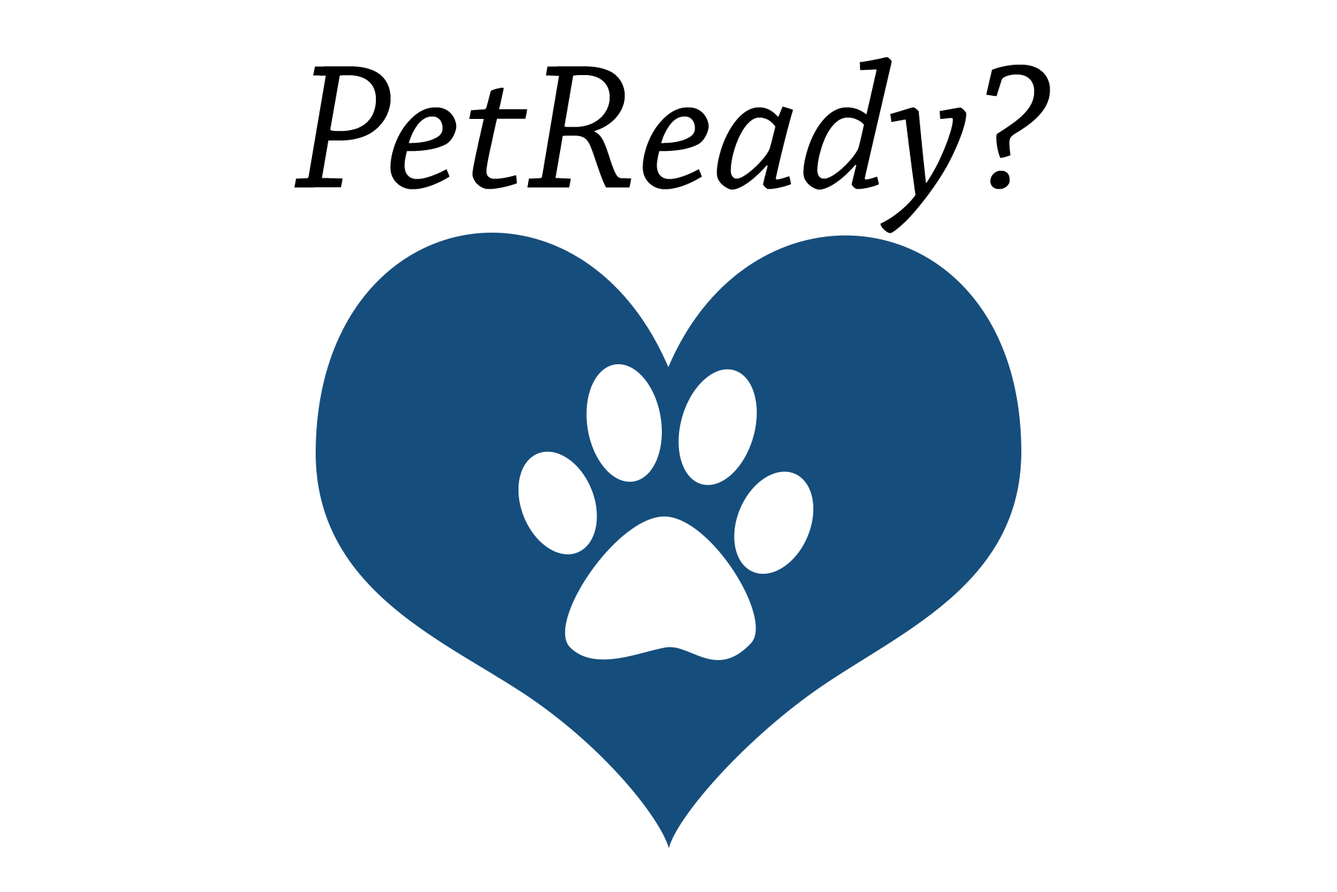
<style>
.page{position:relative;width:1337px;height:892px;background:#ffffff}
.page>*{position:absolute;margin:0}
.t1{font:185.8px "ChaparralPro-Italic";color:#000000}
</style>
<div class="page">
<p class="t1" style="left:294px;top:57px;width:757px;height:176px">PetReady?</p>
</div>
